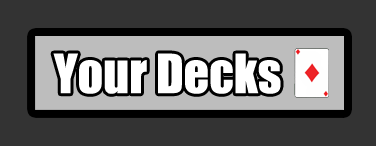
<style>
.page{position:relative;width:376px;height:146px;background:#333333}
.page>*{position:absolute;margin:0}
.t1{font:50px "Impact";color:#ffffff}
</style>
<div class="page">
<p class="t1" style="left:53px;top:53px;width:228px;height:41px">Your Decks</p>
</div>
